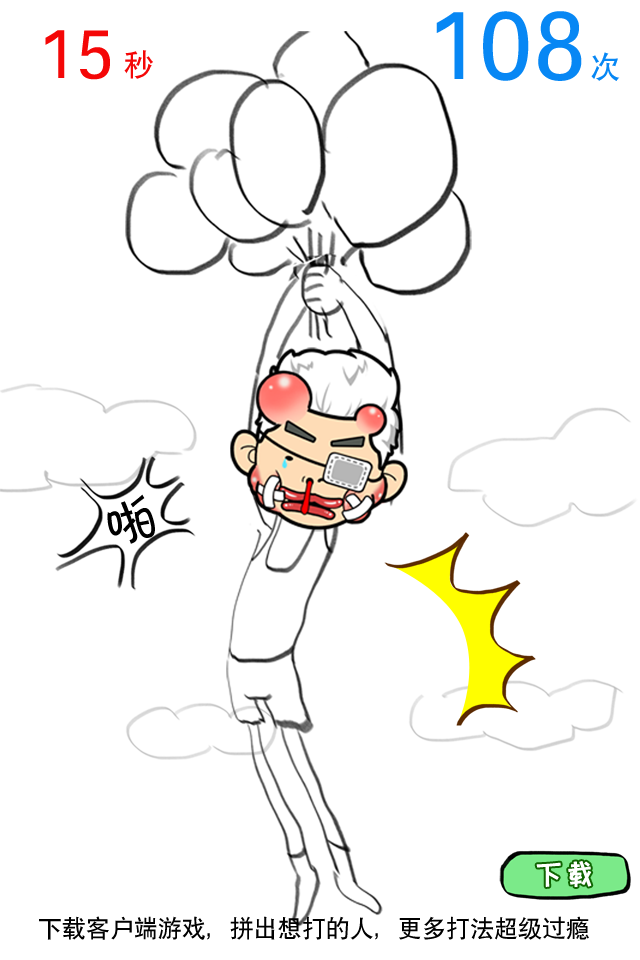
<style>
.page{position:relative;width:640px;height:960px;background:#ffffff}
.page>*{position:absolute;margin:0}
.t1{font:100px "SIL-Hei-Med-Jian";color:#0787f4}
.t2{font:72px "SIL-Hei-Med-Jian";color:#f40707}
.t3{font:30px "SIL-Hei-Med-Jian";color:#f40707}
.t4{font:30px "SIL-Hei-Med-Jian";color:#0787f4}
.t5{font:56.1px "FZKATFW--GB1-0";color:#000000}
.t6{font:30px "FZKATJW--GB1-0";color:#ffffff;font-weight:bold}
.t7{font:24px "SIL-Hei-Med-Jian";color:#000000}
</style>
<div class="page">
<p class="t1" style="left:436px;top:11px;width:146px;height:70px">108</p>
<p class="t2" style="left:45px;top:30px;width:65px;height:50px">15</p>
<p class="t3" style="left:124px;top:50px;width:29px;height:29px">秒</p>
<p class="t4" style="left:591px;top:52px;width:29px;height:29px">次</p>
<p class="t5" style="left:107px;top:494px;width:48px;height:50px;rotate:-17deg">啪</p>
<p class="t6" style="left:536px;top:861px;width:56px;height:26px">下载</p>
<p class="t7" style="left:39px;top:916px;width:550px;height:24px">下载客户端游戏，拼出想打的人，更多打法超级过瘾</p>
</div>
